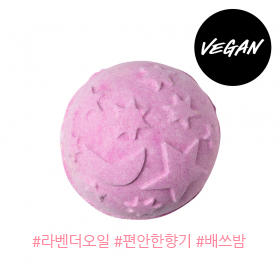
<style>
.page{position:relative;width:280px;height:280px;background:#ffffff}
.page>*{position:absolute;margin:0}
.t1{font:15px "NanumGothic";letter-spacing:-0.02em;color:#ff889e}
</style>
<div class="page">
<p class="t1" style="left:32px;top:234px;width:214px;height:14px">#라벤더오일 #편안한향기 #배쓰밤</p>
</div>
